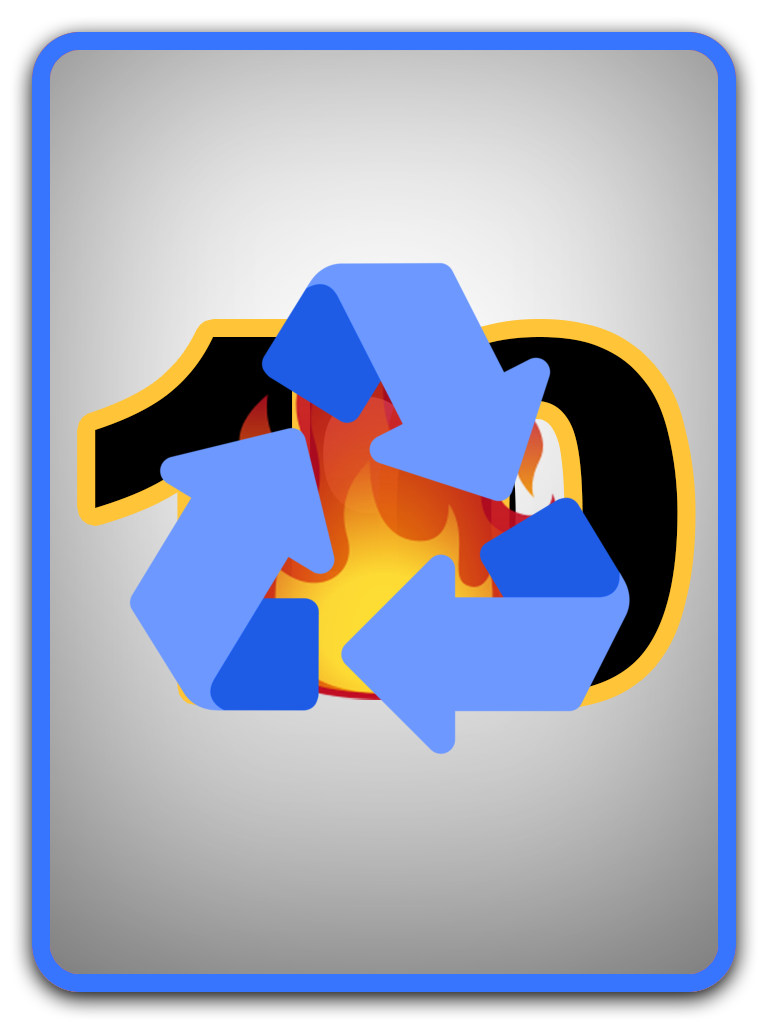
<style>
.page{position:relative;width:768px;height:1024px}
.page>*{position:absolute;margin:0}
.t1{font:480px "Arial-Black"}
</style>
<div class="page">
<p class="t1" style="left:95px;top:337px;width:583px;height:356px">10</p>
</div>
